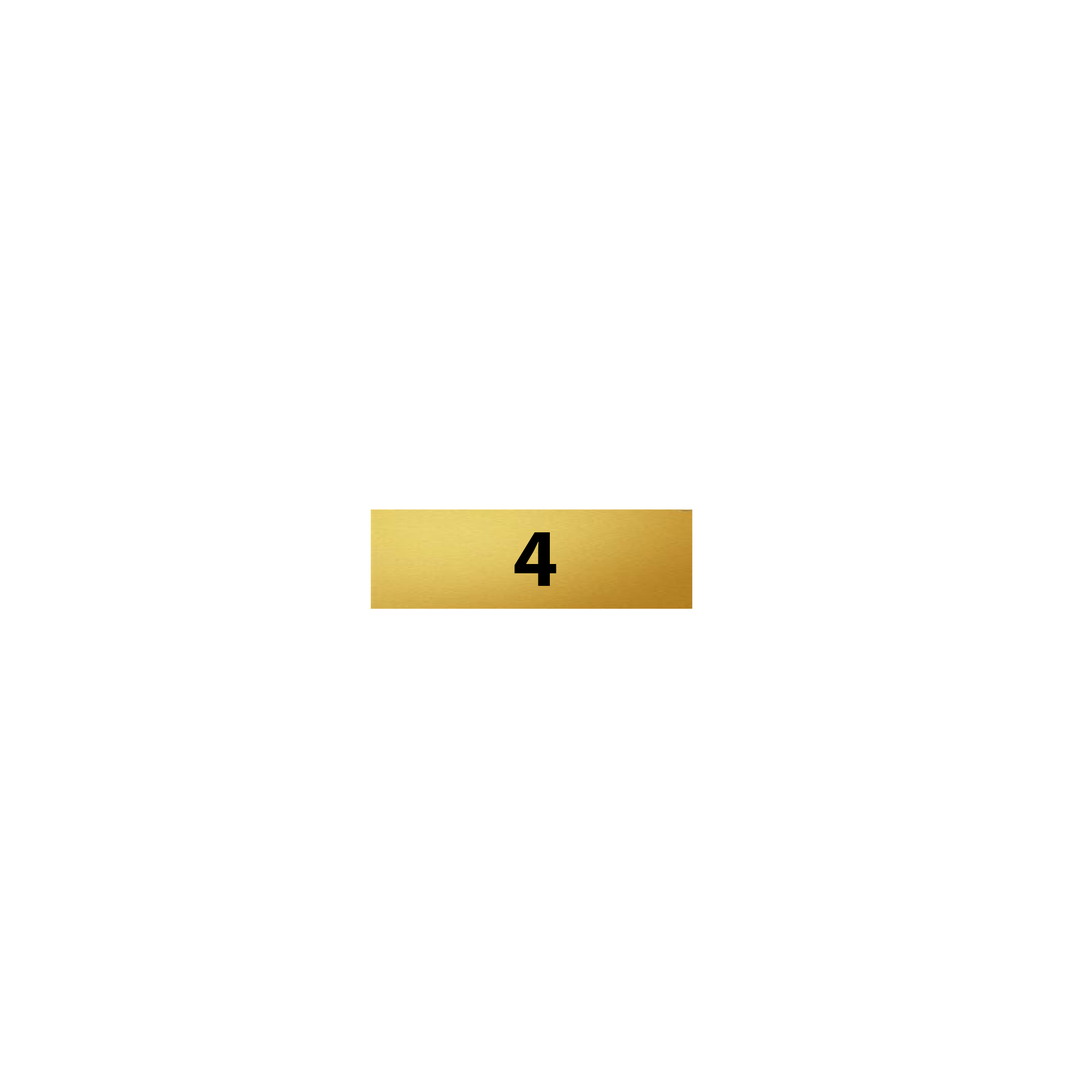
<style>
.page{position:relative;width:1092px;height:1092px;background:#ffffff}
.page>*{position:absolute;margin:0}
.t1{font:81.9px "MyriadPro-Bold";color:#000000}
</style>
<div class="page">
<p class="t1" style="left:514px;top:532px;width:42px;height:54px">4</p>
</div>
